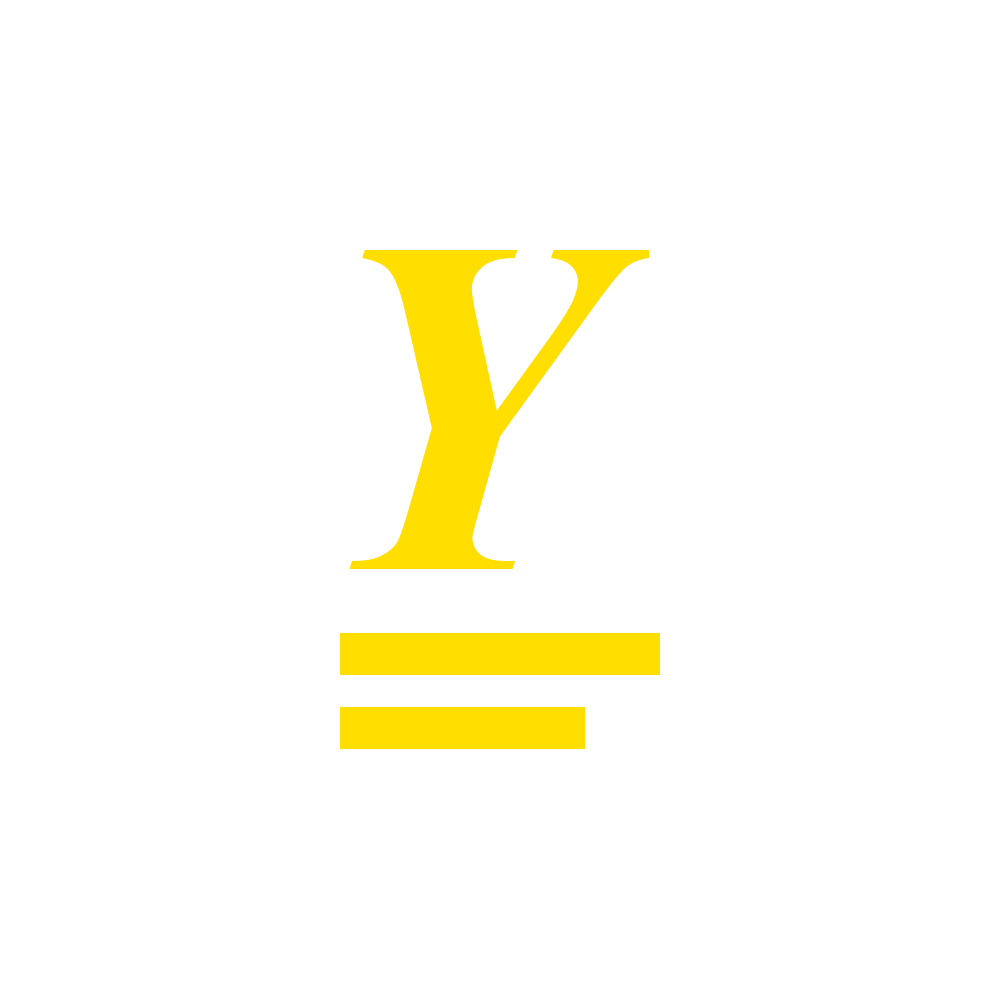
<style>
.page{position:relative;width:1000px;height:1000px;background:#ffffff}
.page>*{position:absolute;margin:0}
.t1{font:480px "TimesNewRomanPS-BoldItalicMT";color:#ffde00}
</style>
<div class="page">
<p class="t1" style="left:349px;top:250px;width:301px;height:319px">Y</p>
</div>
